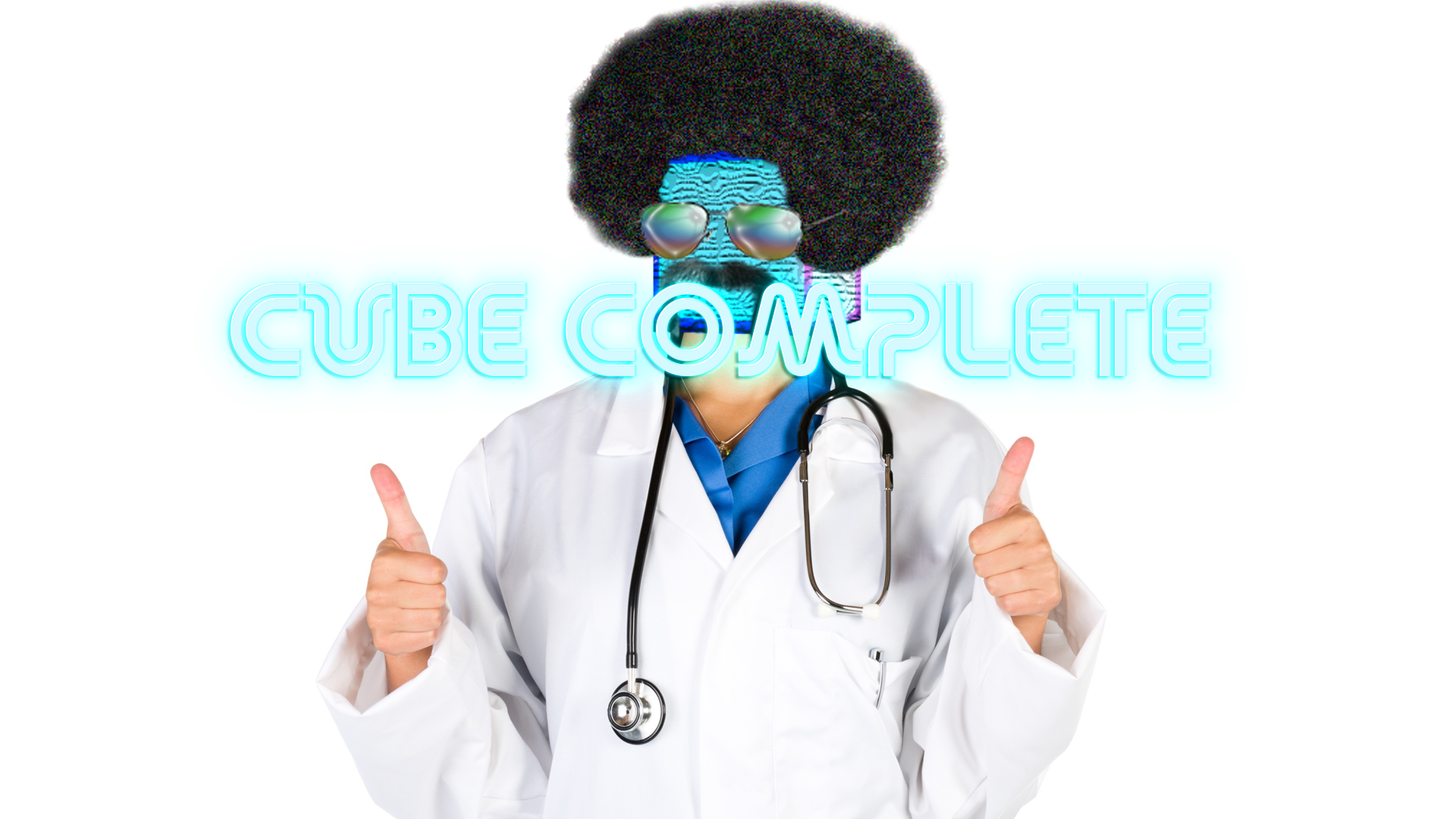
<style>
.page{position:relative;width:1456px;height:819px;background:#ffffff}
.page>*{position:absolute;margin:0}
.t1{font:95.7px "RetroStereoWide";color:#d4f9ff}
</style>
<div class="page">
<p class="t1" style="left:231px;top:282px;width:980px;height:94px">cube complete</p>
</div>
